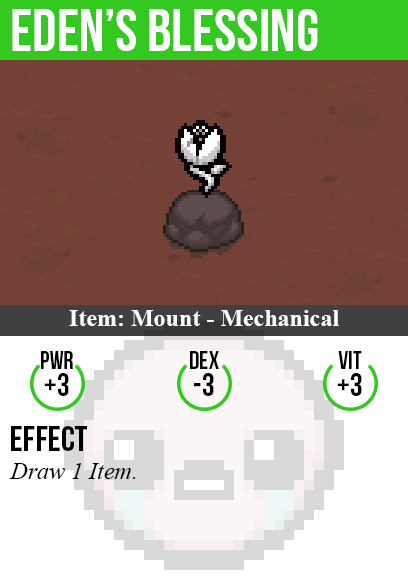
<style>
.page{position:relative;width:408px;height:585px;background:#734136}
.page>*{position:absolute;margin:0}
.t1{font:60px "BebasNeue";color:#ffffff}
.t2{font:24px "TimesNewRomanPS-BoldMT";color:#ffffff}
.t3{font:25px "BebasNeue";color:#000000}
.t4{font:32px "BebasNeue";color:#000000}
.t5{font:36px "BebasNeue";color:#000000}
.t6{font:24px "TimesNewRomanPS-ItalicMT";color:#000000}
</style>
<div class="page">
<p class="t1" style="left:12px;top:9px;width:306px;height:42px">eden’s blessing</p>
<p class="t2" style="left:69px;top:310px;width:270px;height:16px">Item: Mount - Mechanical</p>
<p class="t3" style="left:41px;top:351px;width:32px;height:18px">pwr</p>
<p class="t3" style="left:190px;top:351px;width:29px;height:18px">dex</p>
<p class="t3" style="left:338px;top:351px;width:24px;height:18px">vit</p>
<p class="t4" style="left:44px;top:373px;width:25px;height:23px">+3</p>
<p class="t4" style="left:194px;top:373px;width:20px;height:23px">-3</p>
<p class="t4" style="left:337px;top:373px;width:25px;height:23px">+3</p>
<p class="t5" style="left:11px;top:426px;width:76px;height:25px">Effect</p>
<p class="t6" style="left:9px;top:463px;width:127px;height:16px">Draw 1 Item.</p>
</div>
